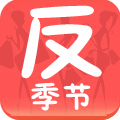
<style>
.page{position:relative;width:120px;height:120px;background:#ff5454}
.page>*{position:absolute;margin:0}
.t1{font:89.4px "FZSEJW--GB1-0";color:#fefefe}
.t2{font:31.2px "FZSEJW--GB1-0";color:#fefefe}
</style>
<div class="page">
<p class="t1" style="left:21px;top:5px;width:81px;height:74px">反</p>
<p class="t2" style="left:31px;top:82px;width:29px;height:29px">季</p>
<p class="t2" style="left:63px;top:83px;width:28px;height:27px">节</p>
</div>
